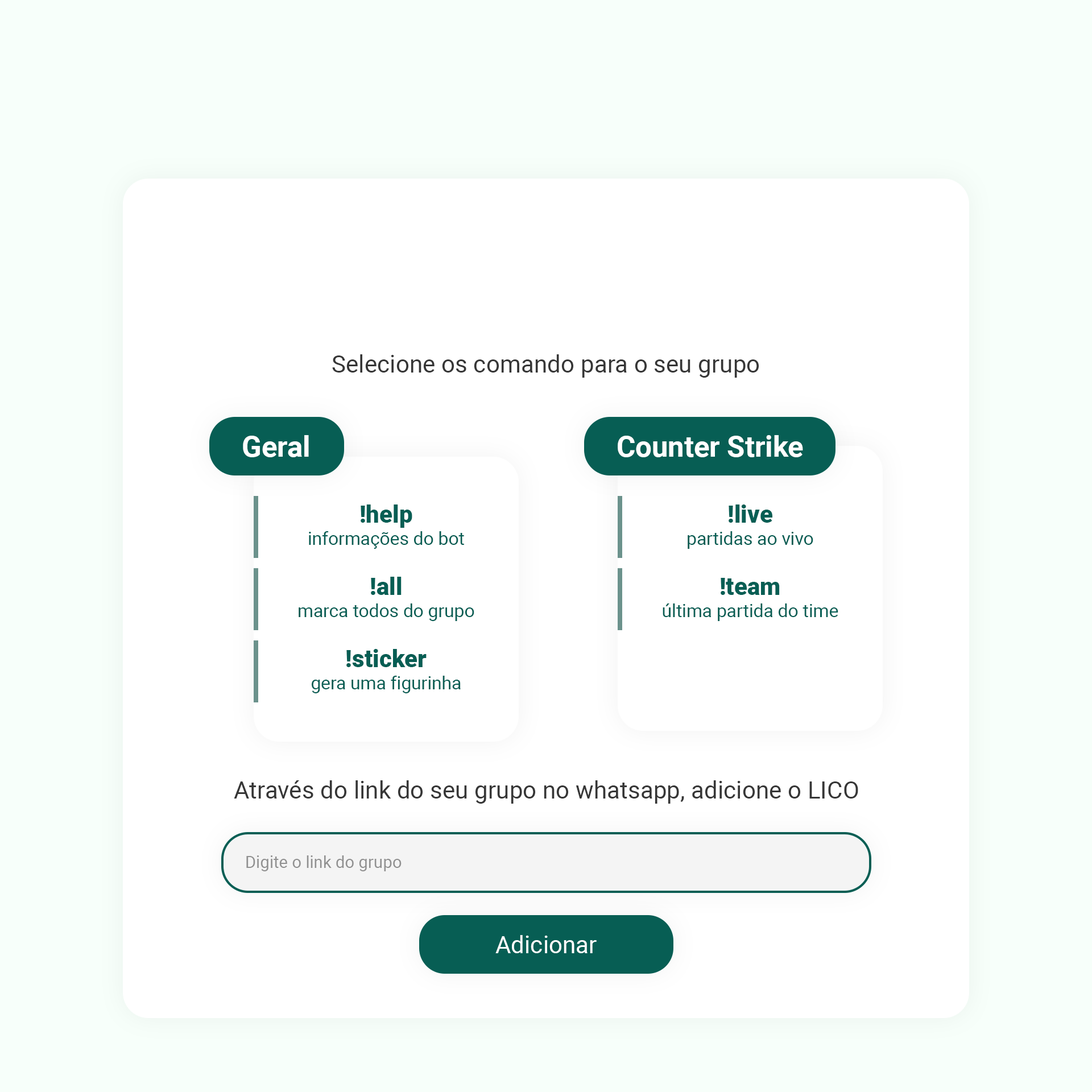
<style>
.page{position:relative;width:1092px;height:1092px;background:#ffffff}
.page>*{position:absolute;margin:0}
.t1{font:24.1px "Roboto-Regular";color:#363636}
.t2{font:28.9px "Roboto-Bold";color:#ffffff}
.t3{font:18.1px "Roboto-Regular";color:#075e54}
.t4{font:24.1px "Roboto-Black";color:#075e54}
.t5{font:16.7px "Roboto-Regular";color:#909090}
.t6{font:24.1px "Roboto-Regular";color:#ffffff}
</style>
<div class="page">
<p class="t1" style="left:332px;top:354px;width:427px;height:24px">Selecione os comando para o seu grupo</p>
<p class="t2" style="left:243px;top:435px;width:66px;height:22px">Geral</p>
<p class="t2" style="left:618px;top:435px;width:185px;height:22px">Counter Strike</p>
<p class="t3" style="left:309px;top:504px;width:155px;height:45px;text-align:center"><span class="t4">!help<br></span>informações do bot</p>
<p class="t3" style="left:688px;top:504px;width:125px;height:45px;text-align:center"><span class="t4">!live<br></span>partidas ao vivo</p>
<p class="t3" style="left:299px;top:577px;width:175px;height:44px;text-align:center"><span class="t4">!all<br></span>marca todos do grupo</p>
<p class="t3" style="left:663px;top:578px;width:175px;height:43px;text-align:center"><span class="t4">!team<br></span>última partida do time</p>
<p class="t3" style="left:312px;top:649px;width:149px;height:44px;text-align:center"><span class="t4">!sticker<br></span>gera uma figurinha</p>
<p class="t1" style="left:234px;top:780px;width:624px;height:24px">Através do link do seu grupo no whatsapp, adicione o LICO</p>
<p class="t5" style="left:246px;top:855px;width:156px;height:16px">Digite o link do grupo</p>
<p class="t6" style="left:495px;top:935px;width:102px;height:18px">Adicionar</p>
</div>
